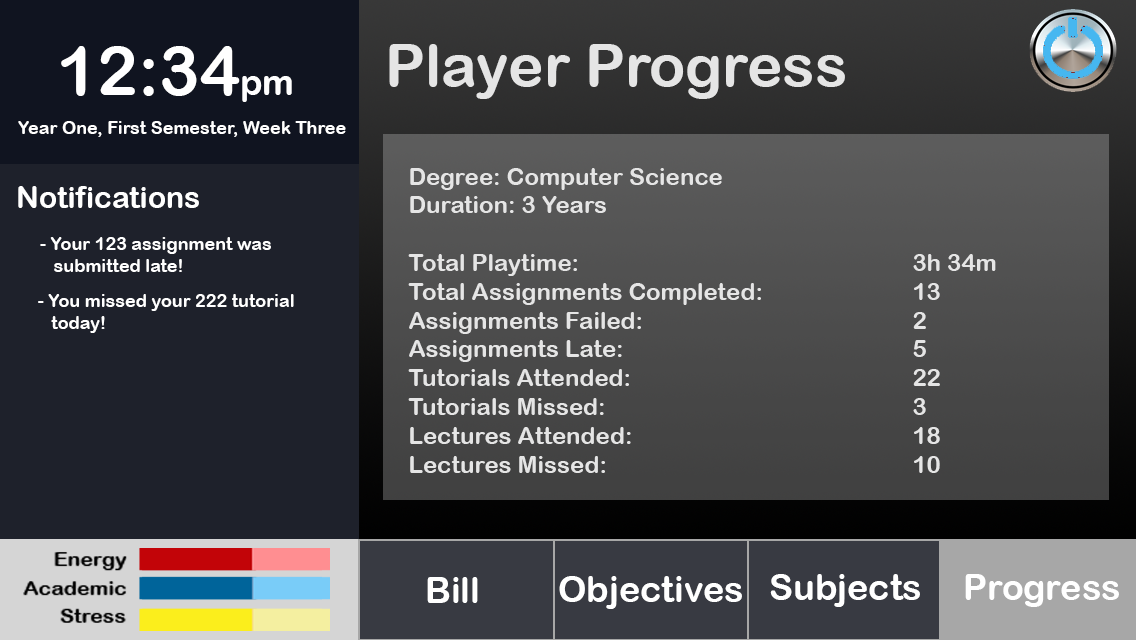
<style>
.page{position:relative;width:1136px;height:640px}
.page>*{position:absolute;margin:0}
.t1{font:68px "ArialRoundedMTBold";color:#ffffff}
.t2{font:36px "ArialRoundedMTBold";color:#ffffff}
.t3{font:60px "ArialRoundedMTBold";color:#e5e5e5}
.t4{font:18px "ArialRoundedMTBold";color:#ffffff}
.t5{font:24px "ArialRoundedMTBold";color:#e5e5e5}
.t6{font:30px "ArialRoundedMTBold";color:#ffffff}
</style>
<div class="page">
<p class="t1" style="left:61px;top:46px;width:231px;height:56px">12:34<span class="t2">pm</span></p>
<p class="t3" style="left:389px;top:44px;width:456px;height:55px">Player Progress</p>
<p class="t4" style="left:18px;top:121px;width:328px;height:16px">Year One, First Semester, Week Three</p>
<p class="t5" style="left:408px;top:168px;width:588px;height:305px">Degree: Computer Science<br>Duration: 3 Years<br><br>Total Playtime:          3h 34m<br>Total Assignments Completed:     13<br>Assignments Failed:        2<br>Assignments Late:         5<br>Tutorials Attended:        22<br>Tutorials Missed:         3<br>Lectures Attended:        18<br>Lectures Missed:         10</p>
<p class="t6" style="left:18px;top:186px;width:181px;height:22px">Notifications</p>
<p class="t4" style="left:40px;top:237px;width:231px;height:35px">- Your 123 assignment was <br>   submitted late!</p>
<p class="t4" style="left:38px;top:294px;width:256px;height:39px">- You missed your 222 tutorial <br>   today!</p>
<p class="t2" style="left:427px;top:577px;width:51px;height:26px">Bill</p>
<p class="t2" style="left:559px;top:576px;width:183px;height:33px">Objectives</p>
<p class="t2" style="left:770px;top:574px;width:150px;height:33px">Subjects</p>
<p class="t2" style="left:965px;top:574px;width:154px;height:33px">Progress</p>
</div>
